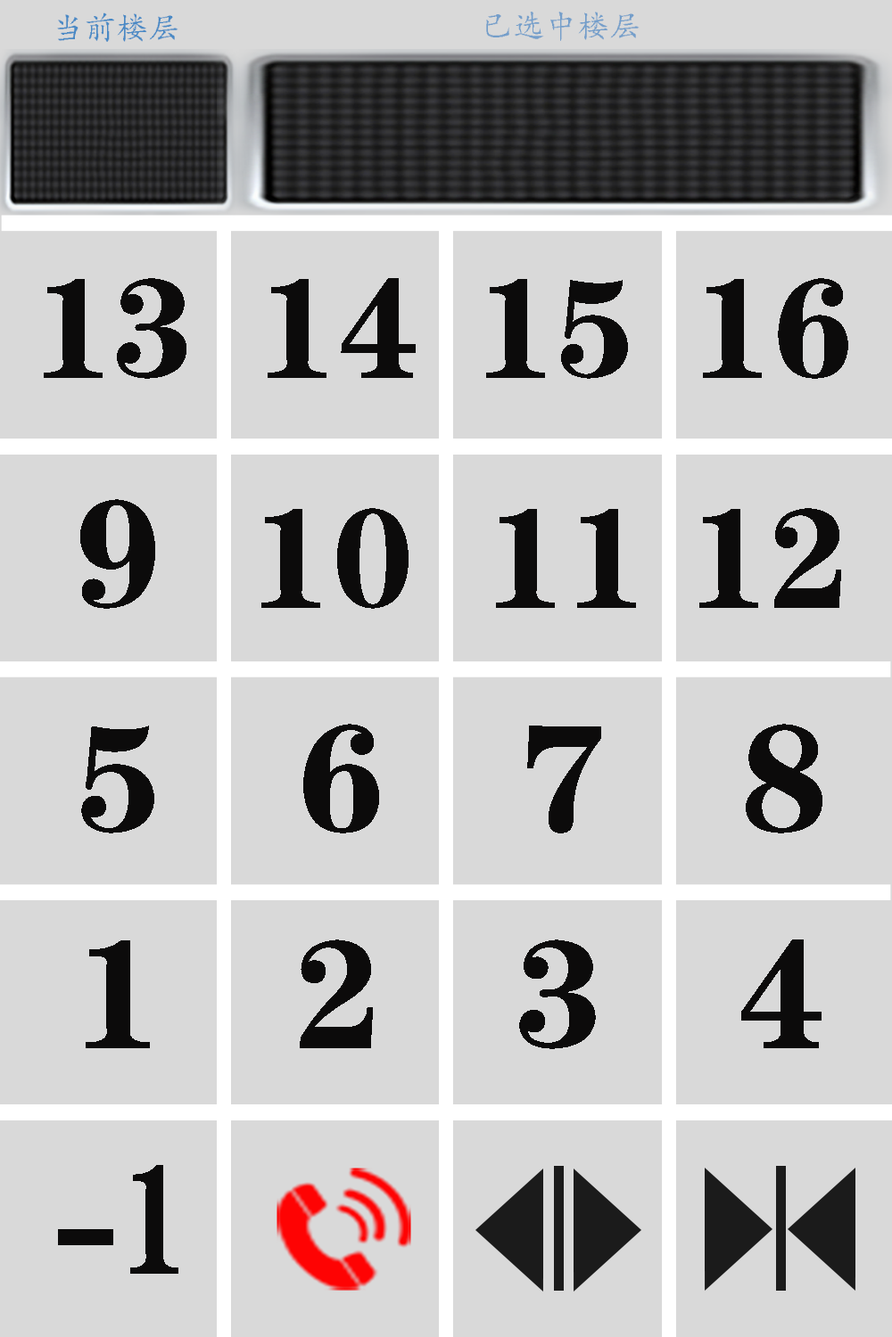
<style>
.page{position:relative;width:892px;height:1337px;background:#d9d9d9}
.page>*{position:absolute;margin:0}
.t1{font:32.1px "¿¬Ìå";color:#4989c5}
.t2{font:32.1px "¿¬Ìå";color:#749eca}
.t3{font:142.7px "FZCHSJW--GB1-0";color:#0c0b0b}
.t4{font:155.1px "FZCHSJW--GB1-0";color:#0c0b0b}
.t5{font:156px "FZCHSJW--GB1-0";color:#0c0b0b;scale:0.75 1}
</style>
<div class="page">
<p class="t1" style="left:57px;top:12px;width:121px;height:30px">当前楼层</p>
<p class="t2" style="left:486px;top:12px;width:153px;height:29px">已选中楼层</p>
<p class="t3" style="left:44px;top:278px;width:804px;height:101px">13  14  15  16</p>
<p class="t3" style="left:80px;top:499px;width:761px;height:110px"><span class="t4">9  </span>10  11 12</p>
<p class="t4" style="left:81px;top:724px;width:741px;height:110px">5   6   7   8</p>
<p class="t4" style="left:86px;top:940px;width:735px;height:109px">1   2   3   4</p>
<p class="t5" style="left:58px;top:1165px;width:120px;height:109px">-1</p>
</div>
